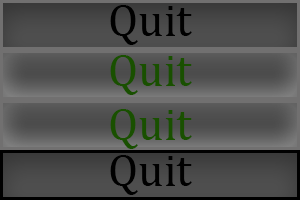
<style>
.page{position:relative;width:300px;height:200px}
.page>*{position:absolute;margin:0}
.t1{font:45.8px "CambriaMath";color:#000000}
.t2{font:45.8px "CambriaMath";color:#195000}
</style>
<div class="page">
<p class="t1" style="left:110px;top:5px;width:82px;height:40px">Quit</p>
<p class="t2" style="left:110px;top:55px;width:82px;height:40px">Quit</p>
<p class="t2" style="left:110px;top:109px;width:82px;height:40px">Quit</p>
<p class="t1" style="left:110px;top:155px;width:82px;height:40px">Quit</p>
</div>
